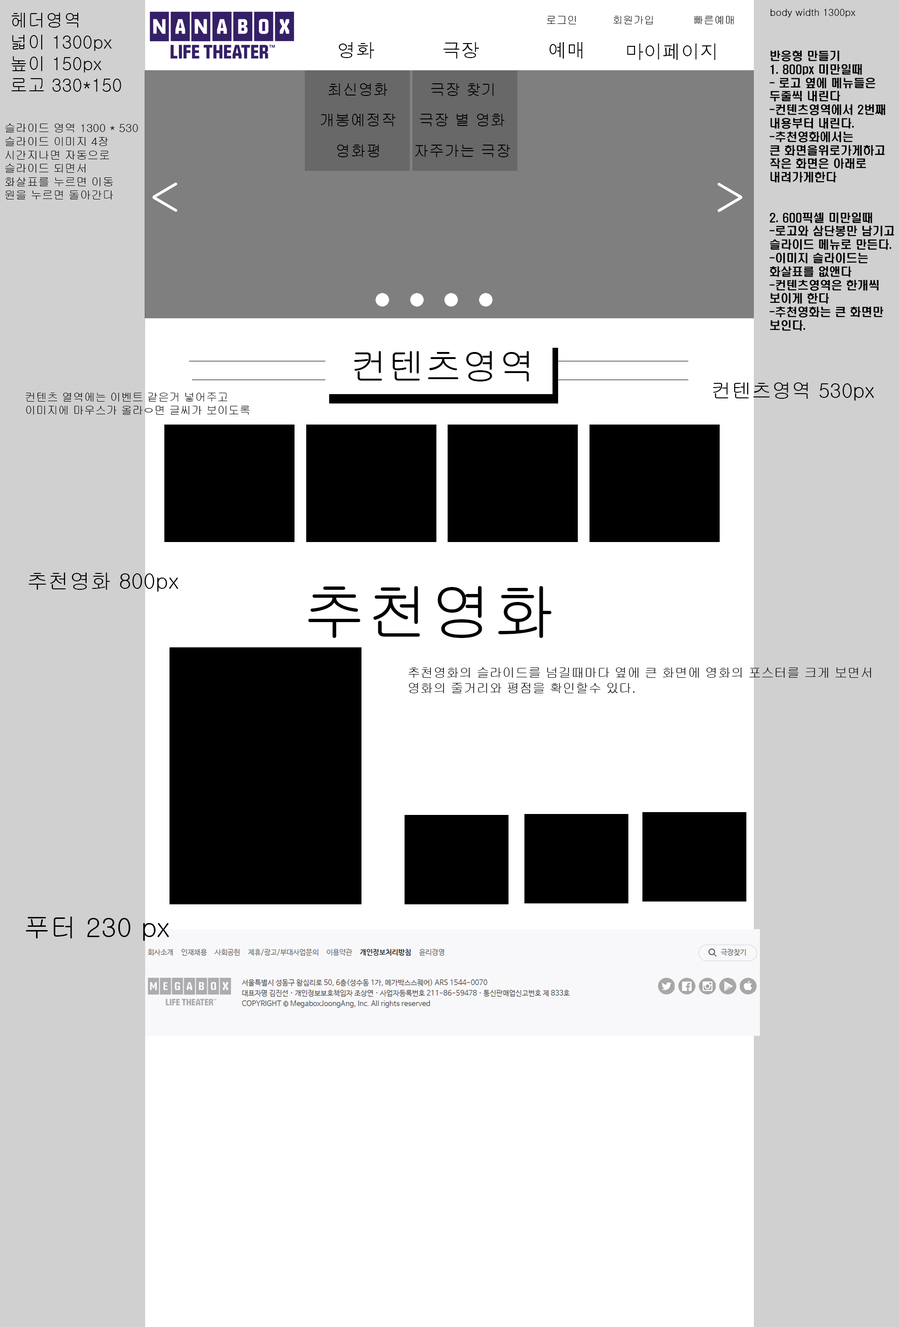
<style>
.page{position:relative;width:899px;height:1327px;background:#ffffff}
.page>*{position:absolute;margin:0}
.t1{font:18.1px "Gulim";color:#000000}
.t2{font:10.7px "Gulim";color:#000000}
.t3{font:9.7px "Gulim";color:#000000}
.t4{font:18.7px "Dotum";color:#000000}
.t5{font:11.2px "H2hdrM";color:#000000}
.t6{font:15.5px "Gulim";color:#000000}
.t7{font:11.1px "Gulim";color:#000000}
.t8{font:44.1px "Gulim";color:#ffffff;scale:1.09 1}
.t9{font:37.1px "Gulim";color:#000000}
.t10{font:20.4px "Gulim";color:#000000}
.t11{font:11.2px "Gulim";color:#000000}
.t12{font:21.3px "Gulim";color:#000000}
.t13{font:63.6px "Gulim";color:#000000}
.t14{font:12.9px "Gulim";color:#000000}
.t15{font:26.9px "Gulim";color:#000000}
</style>
<div class="page">
<p class="t1" style="left:11px;top:13px;width:110px;height:79px">헤더영역<br>넓이 1300px<br>높이 150px<br>로고 330*150</p>
<p class="t2" style="left:547px;top:16px;width:186px;height:8px">로그인          회원가입           빠른예매</p>
<p class="t3" style="left:770px;top:9px;width:85px;height:8px">body width 1300px</p>
<p class="t4" style="left:338px;top:42px;width:36px;height:17px">영화</p>
<p class="t4" style="left:443px;top:42px;width:36px;height:17px">극장</p>
<p class="t4" style="left:549px;top:42px;width:33px;height:17px">예매</p>
<p class="t4" style="left:627px;top:44px;width:88px;height:16px">마이페이지</p>
<p class="t5" style="left:769px;top:51px;width:125px;height:280px">반응형 만들기<br>1. 800px 미만일때 <br>- 로고 옆에 메뉴들은<br>두줄씩 내린다<br>-컨텐츠영역에서 2번째<br>내용부터 내린다.<br>-추천영화에서는 <br>큰 화면을위로가게하고<br>작은 화면은 아래로<br>내려가게한다<br><br><br>2. 600픽셀 미만일때<br>-로고와 삼단봉만 남기고<br>슬라이드 메뉴로 만든다.<br>-이미지 슬라이드는 <br>화살표를 없앤다<br>-컨텐츠영역은 한개씩<br>보이게 한다<br>-추천영화는 큰 화면만<br>보인다.</p>
<p class="t6" style="left:328px;top:83px;width:60px;height:13px">최신영화</p>
<p class="t6" style="left:431px;top:83px;width:62px;height:13px">극장 찾기</p>
<p class="t6" style="left:321px;top:114px;width:75px;height:12px">개봉예정작</p>
<p class="t6" style="left:420px;top:114px;width:85px;height:12px">극장 별 영화</p>
<p class="t7" style="left:5px;top:123px;width:133px;height:76px">슬라이드 영역 1300 * 530 <br>슬라이드 이미지 4장<br>시간지나면 자동으로 <br>슬라이드 되면서<br>화살표를 누르면 이동<br>원을 누르면 돌아간다</p>
<p class="t6" style="left:337px;top:145px;width:42px;height:12px">영화평</p>
<p class="t6" style="left:415px;top:145px;width:95px;height:12px">자주가는 극장</p>
<p class="t8" style="left:152px;top:183px;width:25px;height:29px">&lt;</p>
<p class="t8" style="left:717px;top:183px;width:25px;height:29px;rotate:180deg">&lt;</p>
<p class="t9" style="left:354px;top:351px;width:175px;height:30px">컨텐츠영역</p>
<p class="t10" style="left:713px;top:382px;width:161px;height:19px">컨텐츠영역 530px</p>
<p class="t11" style="left:26px;top:393px;width:223px;height:22px">컨텐츠 열역에는 이벤트 같은거 넣어주고<br>이미지에 마우스가 올라ㅇ면 글씨가 보이도록</p>
<p class="t12" style="left:29px;top:572px;width:149px;height:20px">추천영화 800px</p>
<p class="t13" style="left:308px;top:586px;width:243px;height:52px">추천영화</p>
<p class="t14" style="left:408px;top:667px;width:463px;height:26px">추천영화의 슬라이드를 넘길때마다 옆에 큰 화면에 영화의 포스터를 크게 보면서<br>영화의 줄거리와 평점을 확인할수 있다.</p>
<p class="t15" style="left:26px;top:916px;width:143px;height:25px">푸터 230 px</p>
</div>
